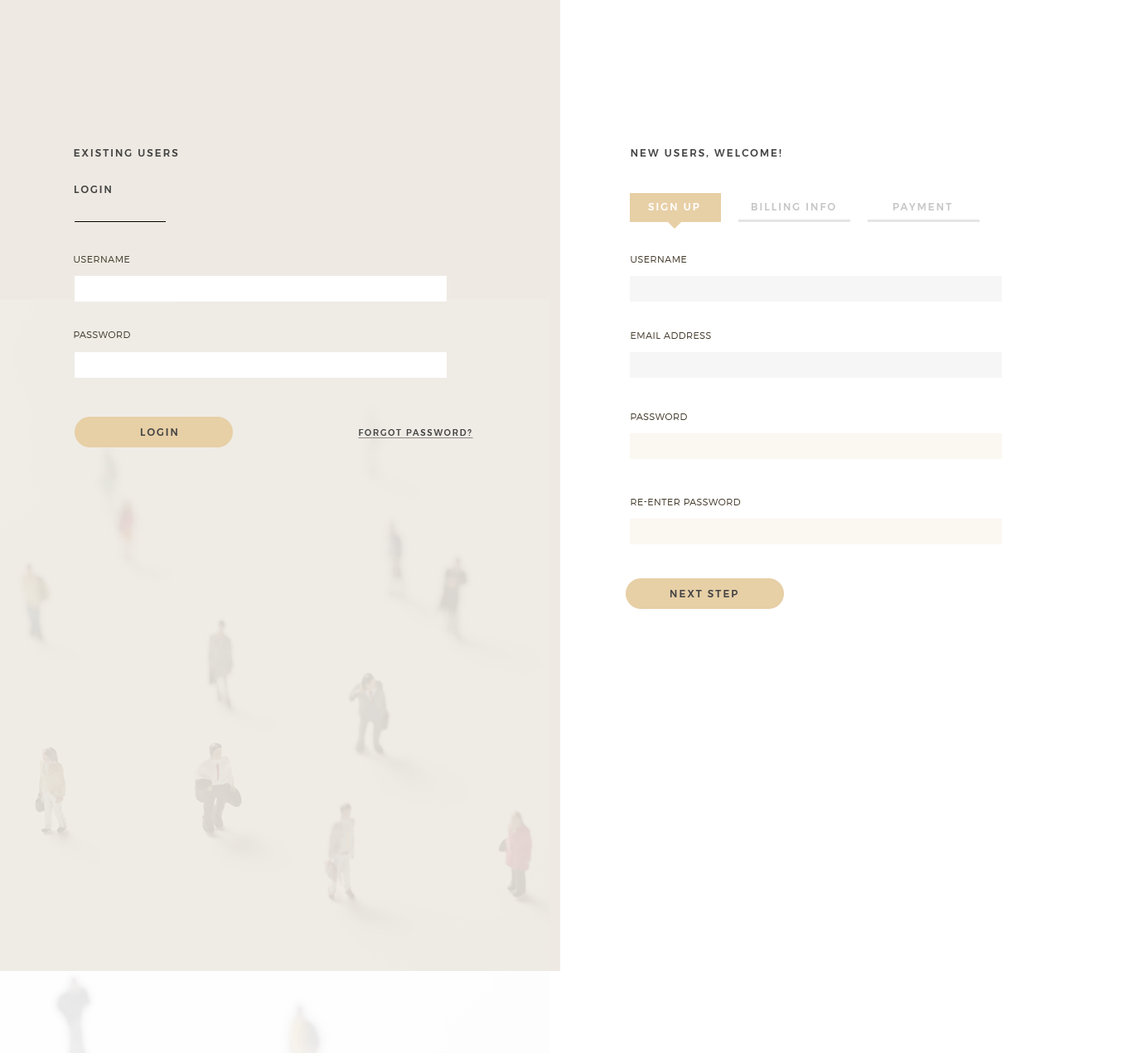
<style>
.page{position:relative;width:1132px;height:1053px;background:#ffffff}
.page>*{position:absolute;margin:0}
.t1{font:9.7px "Montserrat-Medium";letter-spacing:0.18em;color:#434343}
.t2{font:9.7px "Montserrat-Medium";letter-spacing:0.18em;color:#ffffff}
.t3{font:9.7px "Montserrat-Medium";letter-spacing:0.18em;color:#c6c6c6}
.t4{font:9.1px "Montserrat-Light";letter-spacing:0.05em;color:#494031;text-transform:uppercase}
.t5{font:8.3px "Montserrat-Medium";letter-spacing:0.18em;color:#434343;text-decoration:underline}
</style>
<div class="page">
<p class="t1" style="left:74px;top:149px;width:104px;height:8px">EXISTING USERS</p>
<p class="t1" style="left:631px;top:149px;width:151px;height:8px">NEW USERS, WELCOME!</p>
<p class="t1" style="left:74px;top:186px;width:37px;height:7px">LOGIN</p>
<p class="t2" style="left:648px;top:203px;width:51px;height:8px">SIGN UP</p>
<p class="t3" style="left:751px;top:203px;width:84px;height:8px">BILLING INFO</p>
<p class="t3" style="left:893px;top:203px;width:59px;height:8px">PAYMENT</p>
<p class="t4" style="left:74px;top:256px;width:56px;height:7px">Username</p>
<p class="t4" style="left:631px;top:256px;width:56px;height:7px">Username</p>
<p class="t4" style="left:74px;top:331px;width:56px;height:7px">password</p>
<p class="t4" style="left:631px;top:332px;width:80px;height:7px">email address</p>
<p class="t4" style="left:631px;top:414px;width:56px;height:6px">password</p>
<p class="t1" style="left:140px;top:428px;width:37px;height:8px">LOGIN</p>
<p class="t5" style="left:358px;top:429px;width:115px;height:9px">FORGOT PASSWORD?</p>
<p class="t4" style="left:631px;top:499px;width:110px;height:7px">re-enter password</p>
<p class="t1" style="left:670px;top:590px;width:68px;height:8px">NEXT STEP</p>
</div>
